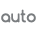
<style>
.page{position:relative;width:37px;height:34px;background:#ffffff}
.page>*{position:absolute;margin:0}
.t1{font:16px "Comfortaa-Bold";color:#7a7d80}
</style>
<div class="page">
<p class="t1" style="left:1px;top:9px;width:35px;height:14px">auto</p>
</div>
